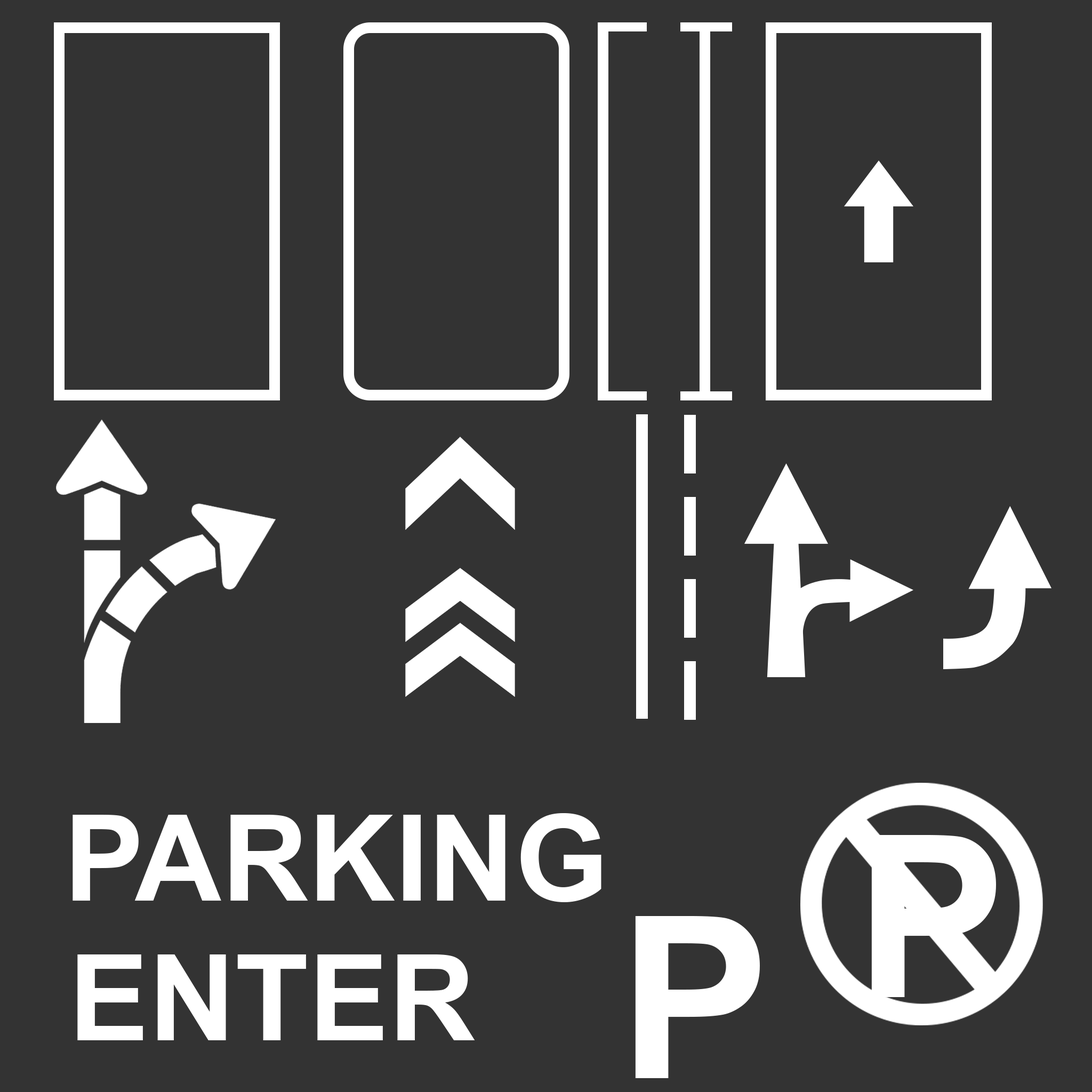
<style>
.page{position:relative;width:1092px;height:1092px;background:#333333}
.page>*{position:absolute;margin:0}
.t1{font:120px "Arial-BoldMT";color:#ffffff}
.t2{font:226.6px "Arial-BoldMT";color:#ffffff}
</style>
<div class="page">
<p class="t1" style="left:73px;top:813px;width:528px;height:89px">PARKING</p>
<p class="t2" style="left:871px;top:835px;width:125px;height:162px">P</p>
<p class="t2" style="left:635px;top:916px;width:125px;height:162px">P</p>
<p class="t1" style="left:77px;top:954px;width:398px;height:86px">ENTER</p>
</div>
